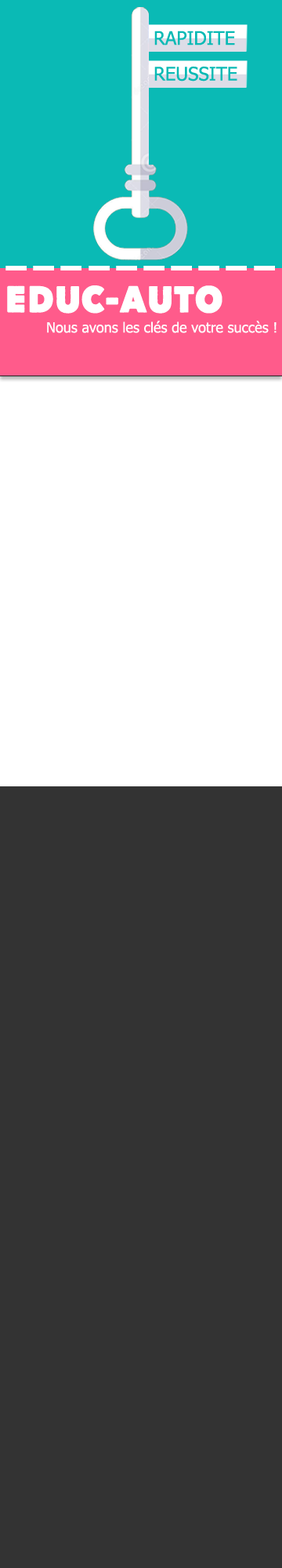
<style>
.page{position:relative;width:282px;height:1568px;background:#333333}
.page>*{position:absolute;margin:0}
.t1{font:18.8px "Tahoma";color:#0abab5}
.t2{font:56.4px "Tahoma";color:#ffffff;scale:1.35 1}
.t3{font:37.6px "HereJustNow-Black";color:#ffffff}
.t4{font:14.1px "Tahoma";color:#ffffff}
</style>
<div class="page">
<p class="t1" style="left:154px;top:31px;width:81px;height:14px">RAPIDITE</p>
<p class="t1" style="left:154px;top:66px;width:84px;height:16px">REUSSITE</p>
<p class="t2" style="left:5px;top:266px;width:270px;height:4px">------------------</p>
<p class="t3" style="left:7px;top:285px;width:216px;height:29px">EDUC-AUTO</p>
<p class="t4" style="left:47px;top:321px;width:230px;height:12px">Nous avons les clés de votre succès !</p>
</div>
